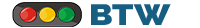
<style>
.page{position:relative;width:200px;height:28px;background:#ffffff}
.page>*{position:absolute;margin:0}
.t1{font:29.3px "Raleway-Black";color:#175e83;scale:1.17 1}
</style>
<div class="page">
<p class="t1" style="left:91px;top:4px;width:80px;height:21px">BTW</p>
</div>
